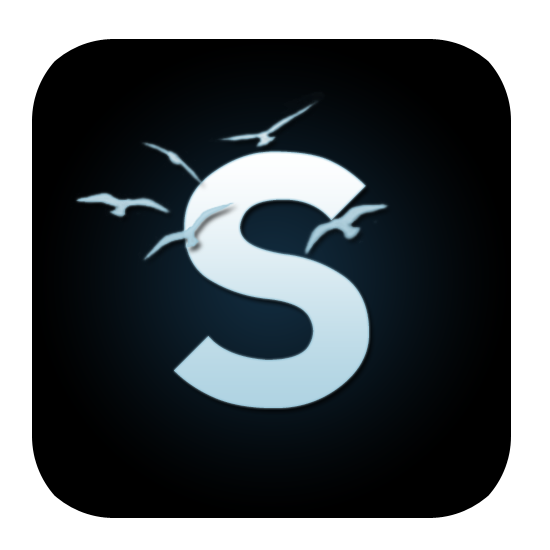
<style>
.page{position:relative;width:550px;height:550px;background:#ffffff}
.page>*{position:absolute;margin:0}
.t1{font:350px "nevis-Bold"}
</style>
<div class="page">
<p class="t1" style="left:174px;top:151px;width:195px;height:257px">S</p>
</div>
